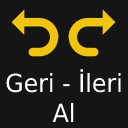
<style>
.page{position:relative;width:128px;height:128px;background:#151515}
.page>*{position:absolute;margin:0}
.t1{font:25px "DejaVuSans";color:#ffffff;scale:0.95 1}
</style>
<div class="page">
<p class="t1" style="left:6px;top:69px;width:115px;height:53px;text-align:center">Geri - İleri<br>Al</p>
</div>
